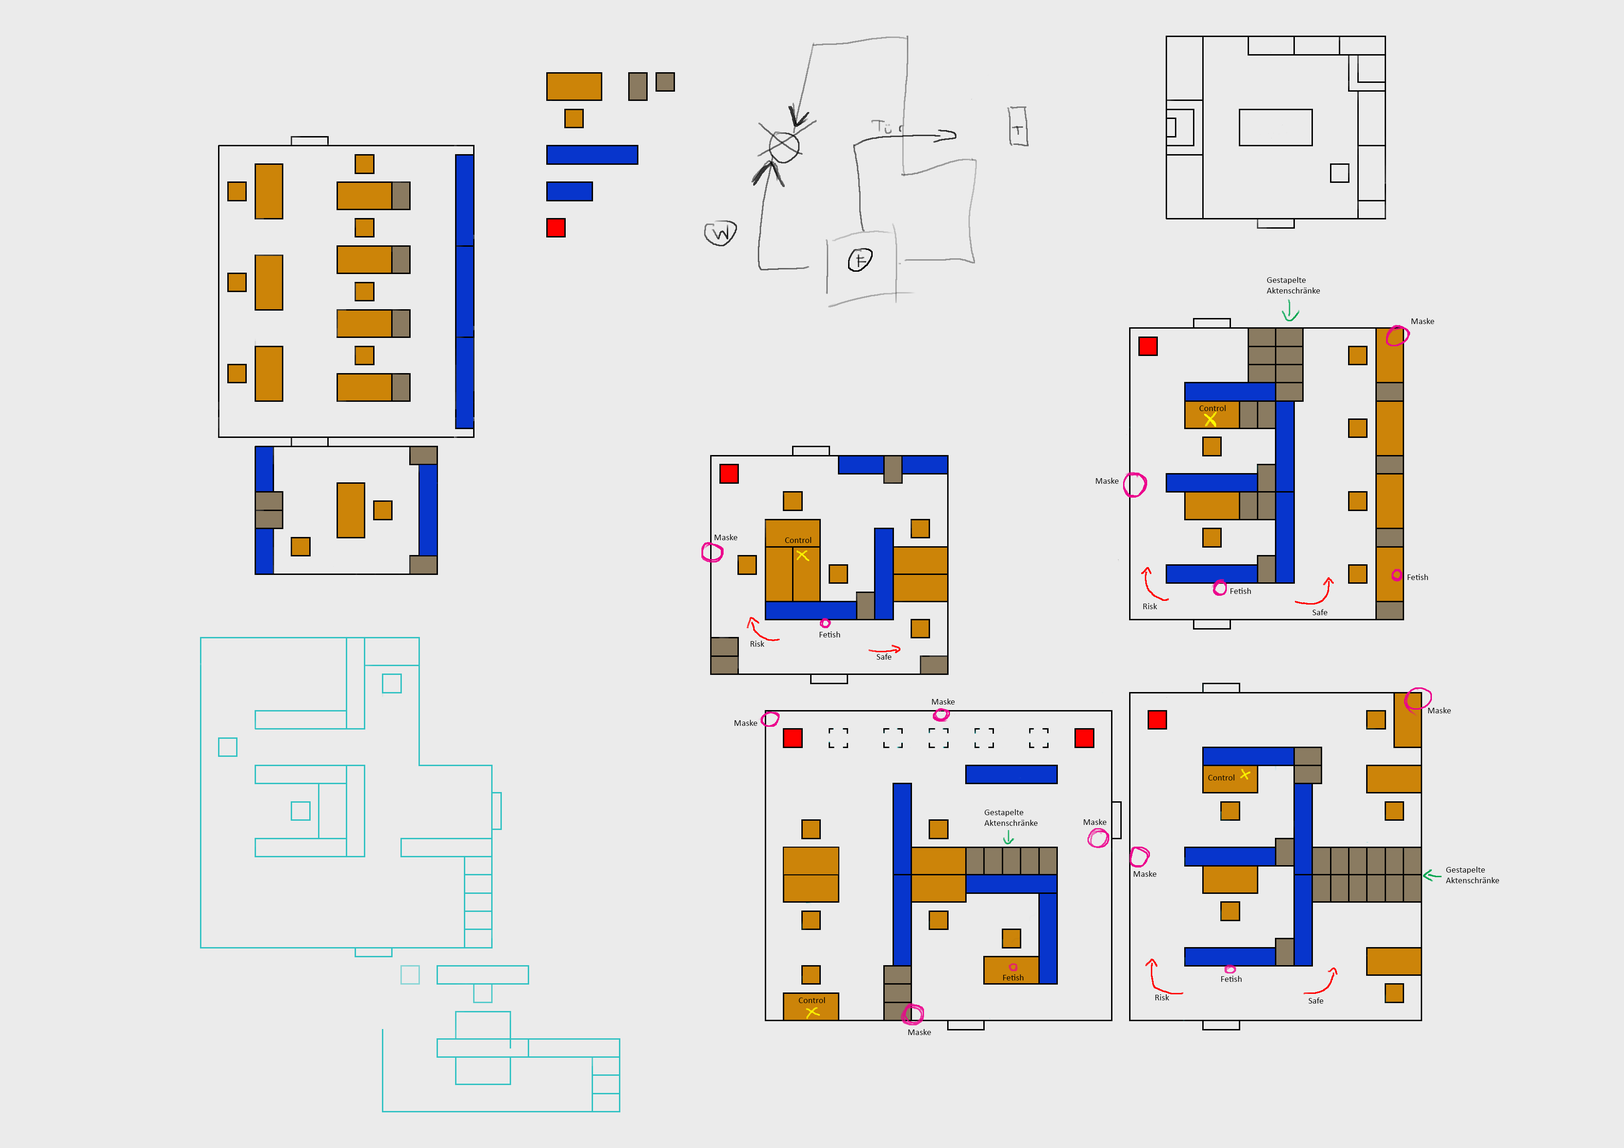
<style>
.page{position:relative;width:1624px;height:1148px;background:#ebebeb}
.page>*{position:absolute;margin:0}
.t1{font:9px "Calibri";color:#000000}
</style>
<div class="page">
<p class="t1" style="left:1266px;top:277px;width:54px;height:16px">Gestapelte<br>Aktenschränke</p>
<p class="t1" style="left:1411px;top:318px;width:23px;height:6px">Maske</p>
<p class="t1" style="left:1199px;top:405px;width:27px;height:6px">Control</p>
<p class="t1" style="left:1096px;top:478px;width:23px;height:6px">Maske</p>
<p class="t1" style="left:714px;top:534px;width:23px;height:6px">Maske</p>
<p class="t1" style="left:785px;top:537px;width:26px;height:6px">Control</p>
<p class="t1" style="left:1407px;top:574px;width:21px;height:6px">Fetish</p>
<p class="t1" style="left:1230px;top:588px;width:21px;height:6px">Fetish</p>
<p class="t1" style="left:1143px;top:603px;width:14px;height:6px">Risk</p>
<p class="t1" style="left:1312px;top:609px;width:15px;height:6px">Safe</p>
<p class="t1" style="left:750px;top:641px;width:14px;height:6px">Risk</p>
<p class="t1" style="left:819px;top:631px;width:21px;height:6px">Fetish</p>
<p class="t1" style="left:876px;top:654px;width:15px;height:6px">Safe</p>
<p class="t1" style="left:932px;top:698px;width:23px;height:6px">Maske</p>
<p class="t1" style="left:1428px;top:707px;width:23px;height:6px">Maske</p>
<p class="t1" style="left:734px;top:720px;width:23px;height:6px">Maske</p>
<p class="t1" style="left:1208px;top:774px;width:26px;height:6px">Control</p>
<p class="t1" style="left:984px;top:809px;width:54px;height:17px">Gestapelte<br>Aktenschränke</p>
<p class="t1" style="left:1084px;top:819px;width:22px;height:6px">Maske</p>
<p class="t1" style="left:1446px;top:866px;width:53px;height:17px">Gestapelte<br>Aktenschränke</p>
<p class="t1" style="left:1134px;top:871px;width:22px;height:6px">Maske</p>
<p class="t1" style="left:1003px;top:974px;width:20px;height:6px">Fetish</p>
<p class="t1" style="left:1221px;top:976px;width:20px;height:6px">Fetish</p>
<p class="t1" style="left:798px;top:997px;width:27px;height:6px">Control</p>
<p class="t1" style="left:1155px;top:994px;width:14px;height:6px">Risk</p>
<p class="t1" style="left:1308px;top:997px;width:15px;height:6px">Safe</p>
<p class="t1" style="left:908px;top:1029px;width:23px;height:6px">Maske</p>
</div>
